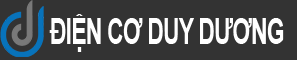
<style>
.page{position:relative;width:297px;height:60px;background:#333333}
.page>*{position:absolute;margin:0}
.t1{font:35.7px "Arial-BoldMT";letter-spacing:-0.03em;color:#ffffff;scale:0.64 1}
</style>
<div class="page">
<p class="t1" style="left:49px;top:14px;width:235px;height:38px">ĐIỆN CƠ DUY DƯƠNG</p>
</div>
